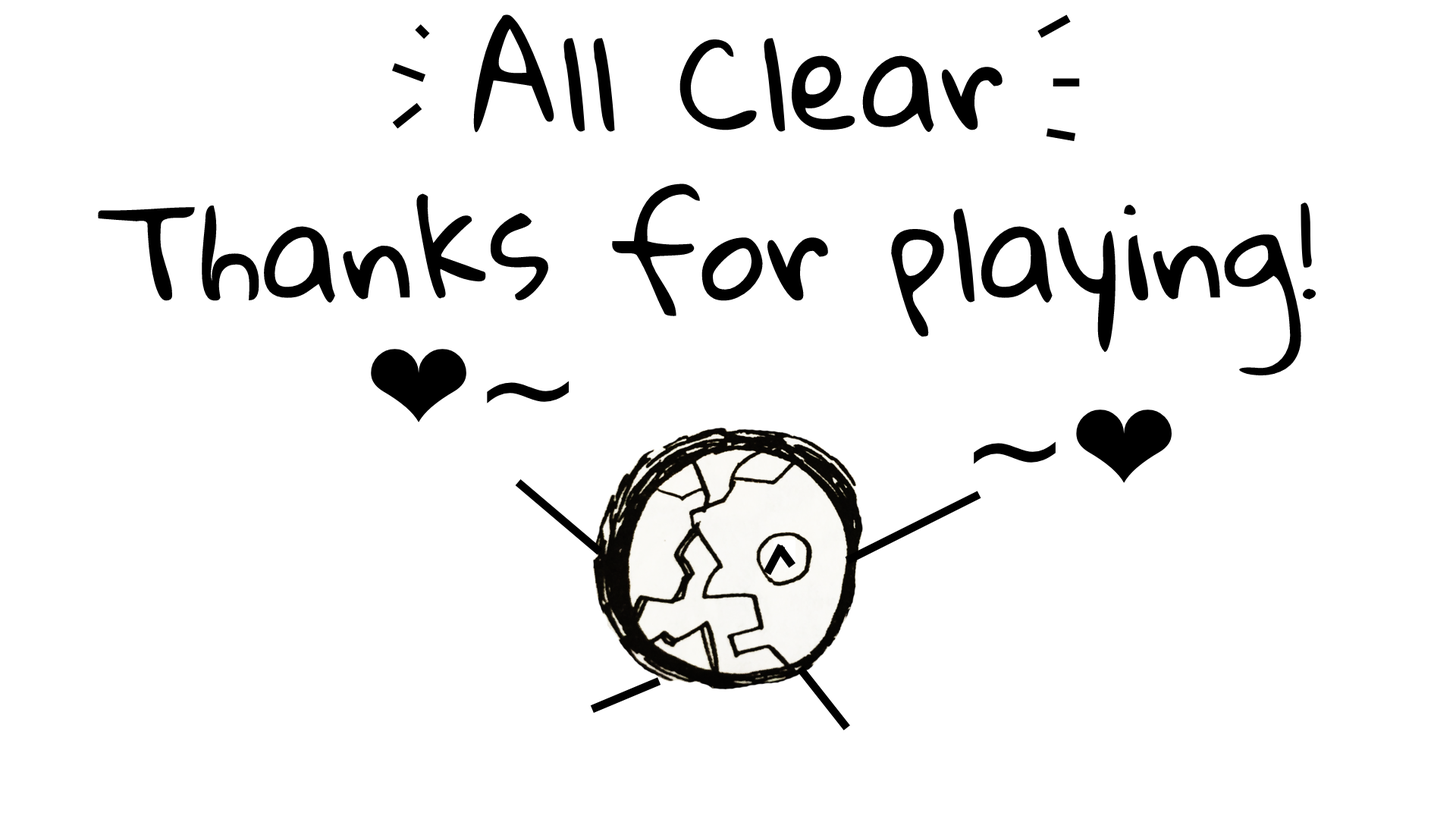
<style>
.page{position:relative;width:1456px;height:819px;background:#ffffff}
.page>*{position:absolute;margin:0}
.t1{font:130.4px "GloriaHallelujah";color:#000000}
.t2{font:130.4px "DejaVuSans";color:#000000}
</style>
<div class="page">
<p class="t1" style="left:473px;top:14px;width:530px;height:119px">All Clear</p>
<p class="t1" style="left:98px;top:184px;width:1218px;height:192px">Thanks for playing!</p>
<p class="t2" style="left:371px;top:349px;width:199px;height:73px">❤~</p>
<p class="t2" style="left:974px;top:409px;width:198px;height:74px">~❤</p>
</div>
